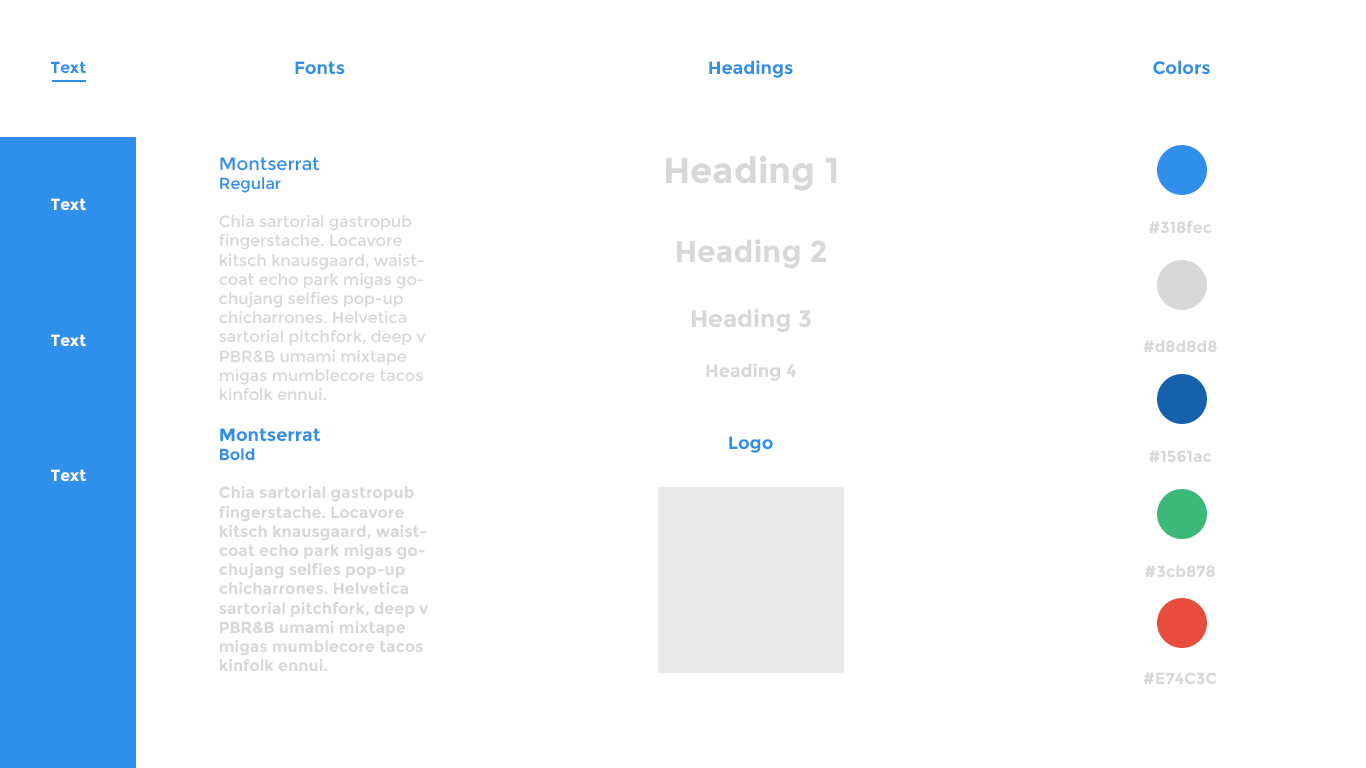
<style>
.page{position:relative;width:1366px;height:768px;background:#ffffff}
.page>*{position:absolute;margin:0}
.t1{font:16px "Montserrat-Bold";color:#318fec}
.t2{font:18px "Montserrat-Bold";color:#318fec}
.t3{font:16px "Montserrat-Regular";color:#d8d8d8}
.t4{font:18px "Montserrat-Regular";color:#318fec}
.t5{font:16px "Montserrat-Regular";color:#318fec}
.t6{font:16px "Montserrat-Bold";color:#d8d8d8}
.t7{font:36px "Montserrat-Bold";color:#d8d8d8}
.t8{font:30px "Montserrat-Bold";color:#d8d8d8}
.t9{font:24px "Montserrat-Bold";color:#d8d8d8}
.t10{font:18px "Montserrat-Bold";color:#d8d8d8}
.t11{font:16px "Montserrat-Bold";color:#ffffff}
</style>
<div class="page">
<p class="t1" style="left:51px;top:61px;width:36px;height:13px">Text</p>
<p class="t2" style="left:295px;top:61px;width:50px;height:14px">Fonts</p>
<p class="t2" style="left:709px;top:60px;width:84px;height:18px">Headings</p>
<p class="t2" style="left:1153px;top:60px;width:57px;height:15px">Colors</p>
<p class="t3" style="left:219px;top:157px;width:210px;height:515px"><span class="t4">Montserrat <br></span><span class="t5">Regular<br></span><br>Chia sartorial gastropub fingerstache. Locavore kitsch knausgaard, waistcoat echo park migas gochujang selfies pop-up chicharrones. Helvetica sartorial pitchfork, deep v PBR&amp;B umami mixtape migas mumblecore tacos kinfolk ennui. <br><br><span class="t2">Montserrat <br></span><span class="t1">Bold<br><br></span><span class="t6">Chia sartorial gastropub fingerstache. Locavore kitsch knausgaard, waistcoat echo park migas gochujang selfies pop-up chicharrones. Helvetica sartorial pitchfork, deep v PBR&amp;B umami mixtape migas mumblecore tacos kinfolk ennui.</span></p>
<p class="t7" style="left:666px;top:155px;width:171px;height:226px;text-align:center">Heading 1<br><br><span class="t8">Heading 2<br><br></span><span class="t9">Heading 3<br><br></span><span class="t10">Heading 4</span></p>
<p class="t11" style="left:51px;top:198px;width:36px;height:13px">Text</p>
<p class="t6" style="left:1149px;top:221px;width:63px;height:13px">#318fec</p>
<p class="t11" style="left:51px;top:334px;width:36px;height:13px">Text</p>
<p class="t6" style="left:1143px;top:340px;width:74px;height:13px">#d8d8d8</p>
<p class="t2" style="left:729px;top:436px;width:44px;height:17px">Logo</p>
<p class="t6" style="left:1149px;top:450px;width:63px;height:13px">#1561ac</p>
<p class="t11" style="left:51px;top:469px;width:36px;height:13px">Text</p>
<p class="t6" style="left:1145px;top:565px;width:70px;height:13px">#3cb878</p>
<p class="t6" style="left:1143px;top:672px;width:74px;height:13px">#E74C3C</p>
</div>
